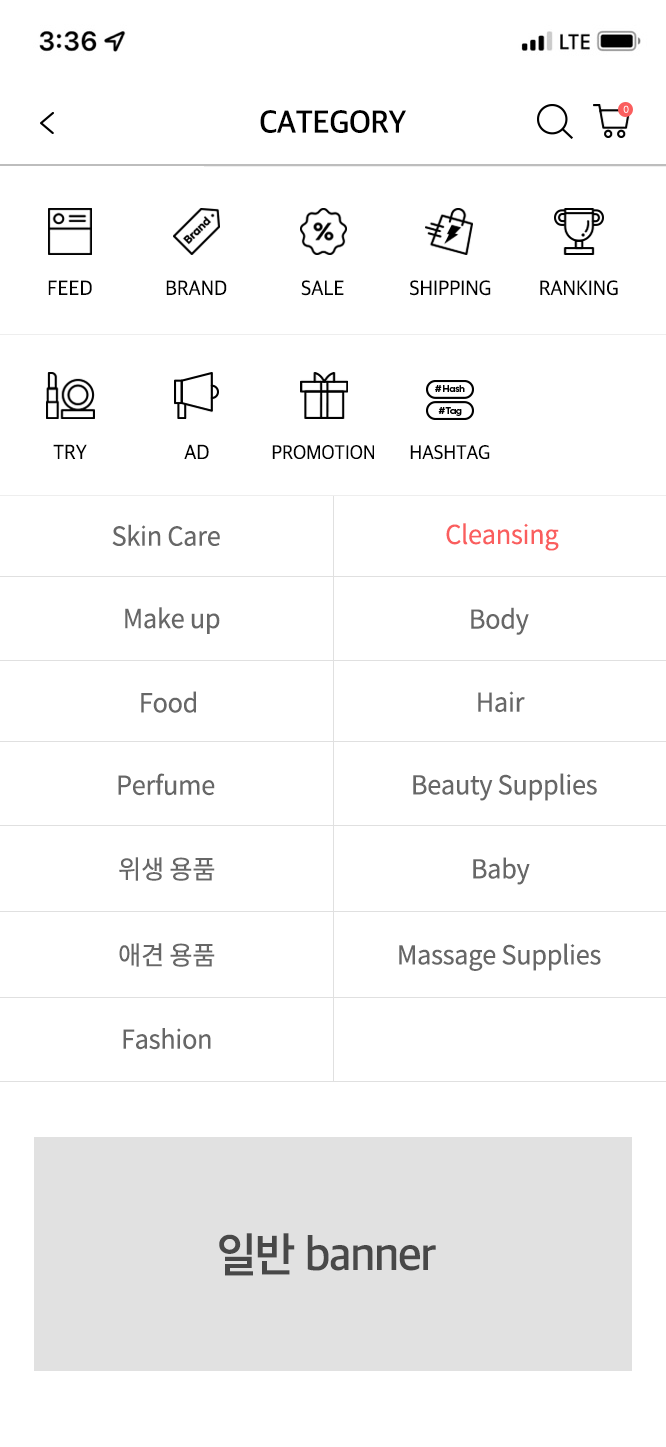
<style>
.page{position:relative;width:666px;height:1447px;background:#ffffff}
.page>*{position:absolute;margin:0}
.t1{font:32px "AppleSDGothicNeo-SemiBold";letter-spacing:-0.01em;color:#000000;text-transform:uppercase}
.t2{font:9.8px "AppleSDGothicNeo-UltraLight";letter-spacing:-0.01em;color:#ffffff}
.t3{font:21px "AppleSDGothicNeo-Regular";letter-spacing:-0.01em;color:#000000;text-transform:uppercase}
.t4{font:21px "AppleSDGothicNeo-Regular";letter-spacing:-0.01em;color:#000000;text-transform:uppercase;scale:0.97 1}
.t5{font:19.9px "AppleSDGothicNeo-Regular";letter-spacing:-0.01em;color:#000000;text-transform:uppercase}
.t6{font:26px "NotoSansCJKkr-Regular";letter-spacing:-0.01em;color:#676767}
.t7{font:26px "NotoSansCJKkr-Regular";letter-spacing:-0.01em;color:#fa5e5e}
.t8{font:47.6px "AppleSDGothicNeo-SemiBold";letter-spacing:-0.022em;color:#484848;scale:0.96 1}
</style>
<div class="page">
<p class="t1" style="left:260px;top:110px;width:146px;height:23px">Category</p>
<p class="t2" style="left:623px;top:105px;width:6px;height:8px">0</p>
<p class="t3" style="left:48px;top:280px;width:44px;height:15px">FEED</p>
<p class="t3" style="left:166px;top:280px;width:61px;height:15px">Brand</p>
<p class="t3" style="left:301px;top:280px;width:43px;height:16px">Sale</p>
<p class="t3" style="left:410px;top:280px;width:81px;height:16px">shipping</p>
<p class="t3" style="left:540px;top:280px;width:78px;height:16px">Ranking</p>
<p class="t4" style="left:53px;top:444px;width:34px;height:15px">Try</p>
<p class="t4" style="left:184px;top:444px;width:25px;height:15px">AD</p>
<p class="t5" style="left:272px;top:445px;width:102px;height:14px">promotion</p>
<p class="t5" style="left:410px;top:445px;width:80px;height:15px">hashtag</p>
<p class="t6" style="left:112px;top:524px;width:108px;height:22px">Skin Care</p>
<p class="t7" style="left:446px;top:523px;width:113px;height:28px">Cleansing</p>
<p class="t6" style="left:125px;top:607px;width:95px;height:27px">Make up</p>
<p class="t6" style="left:471px;top:607px;width:58px;height:28px">Body</p>
<p class="t6" style="left:141px;top:691px;width:55px;height:22px">Food</p>
<p class="t6" style="left:478px;top:691px;width:47px;height:22px">Hair</p>
<p class="t6" style="left:118px;top:773px;width:97px;height:23px">Perfume</p>
<p class="t6" style="left:413px;top:773px;width:184px;height:28px">Beauty Supplies</p>
<p class="t6" style="left:119px;top:857px;width:96px;height:24px">위생 용품</p>
<p class="t6" style="left:473px;top:857px;width:57px;height:28px">Baby</p>
<p class="t6" style="left:119px;top:943px;width:96px;height:24px">애견 용품</p>
<p class="t6" style="left:399px;top:943px;width:202px;height:28px">Massage Supplies</p>
<p class="t6" style="left:123px;top:1028px;width:88px;height:22px">Fashion</p>
<p class="t8" style="left:219px;top:1233px;width:217px;height:43px">일반 banner</p>
</div>
